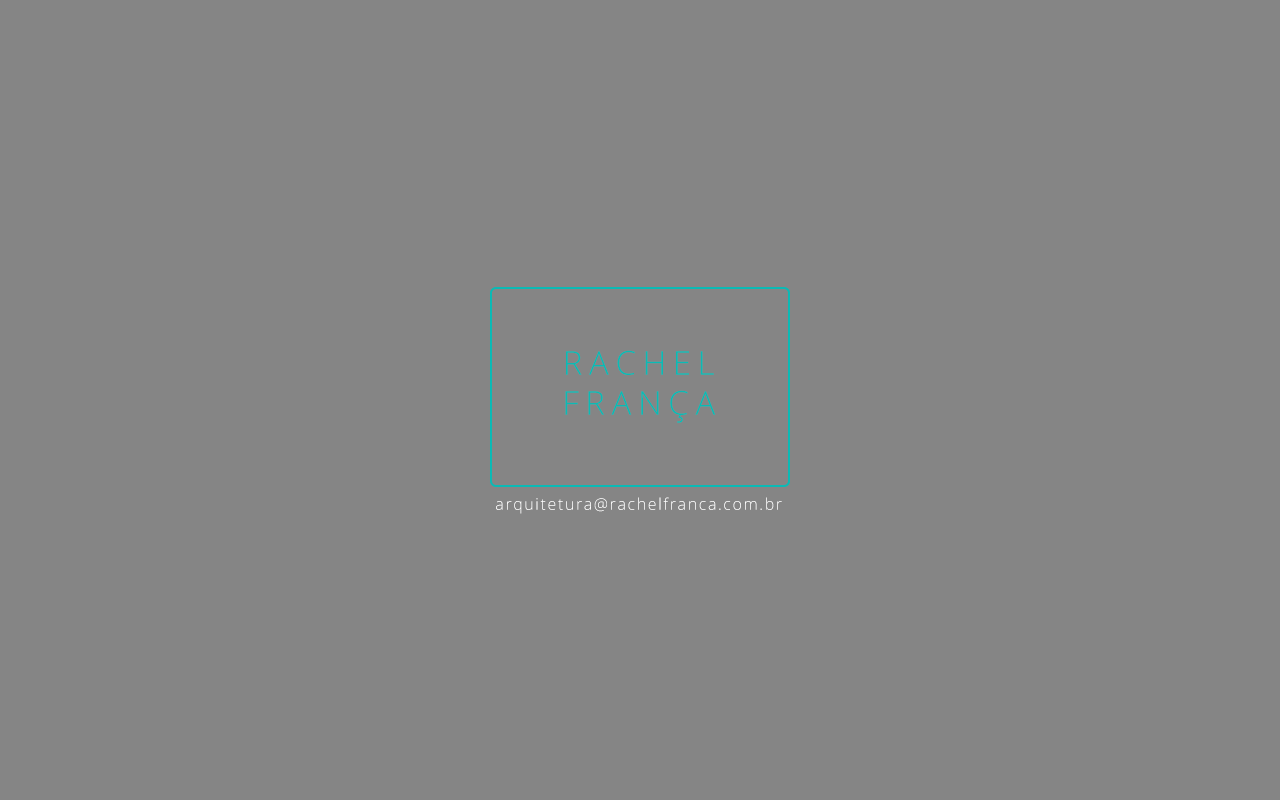
<style>
.page{position:relative;width:1280px;height:800px;background:#858585}
.page>*{position:absolute;margin:0}
.t1{font:33px "OpenSans-Light";letter-spacing:0.2em;color:#0abab5}
.t2{font:16px "OpenSans-Light";letter-spacing:0.1em;color:#ffffff}
</style>
<div class="page">
<p class="t1" style="left:566px;top:350px;width:148px;height:25px">RACHEL</p>
<p class="t1" style="left:565px;top:390px;width:151px;height:33px">FRANÇA</p>
<p class="t2" style="left:496px;top:497px;width:286px;height:17px">arquitetura@rachelfranca.com.br</p>
</div>
